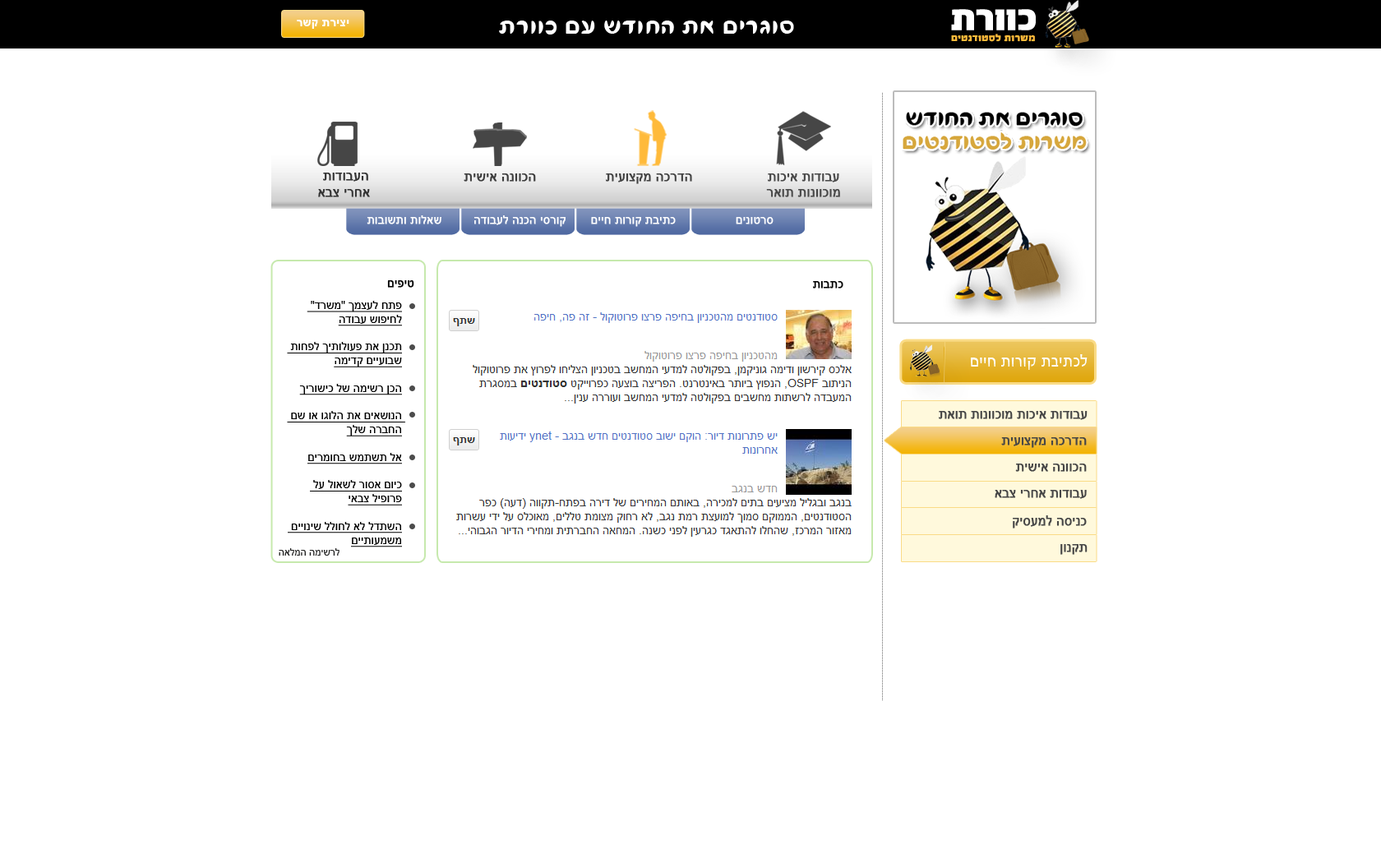
<style>
.page{position:relative;width:1381px;height:863px;background:#ffffff}
.page>*{position:absolute;margin:0}
.t1{font:11.5px "Arial-BoldMT";letter-spacing:0.03em;color:#ffffff}
.t2{font:28.8px "FbFlamingo-Regular";letter-spacing:0.03em;color:#ffffff}
.t3{font:9.9px "FbAdrenalin-Black";letter-spacing:0.03em;color:#ffba3a}
.t4{font:13.2px "ArialMT";color:#333333;font-weight:bold}
.t5{font:13.2px "ArialMT";color:#3c3c3c;font-weight:bold}
.t6{font:13.2px "ArialMT";color:#414141;font-weight:bold}
.t7{font:13.2px "ArialMT";color:#484848;font-weight:bold}
.t8{font:11.5px "ArialMT";color:#ffffff;font-weight:bold}
.t9{font:11.5px "ArialMT";color:#000000;font-weight:bold}
.t10{font:11.5px "ArialMT";color:#000000;text-decoration:underline}
.t11{font:16.4px "FbConcept-Regular";letter-spacing:0.03em;color:#ffffff}
.t12{font:12.9px "ArialMT";color:#464646;font-weight:bold}
.t13{font:9.9px "ArialMT";color:#212121}
</style>
<div class="page">
<p class="t1" style="left:297px;top:20px;width:52px;height:9px">רשק תריצי</p>
<p class="t2" style="left:499px;top:21px;width:295px;height:14px">תרווכ םע שדוחה תא םירגוס</p>
<p class="t3" style="left:951px;top:34px;width:84px;height:8px">םיטנדוטסל תורשמ</p>
<p class="t4" style="left:318px;top:173px;width:52px;height:24px;text-align:center">תודובעה<br>אבצ ירחא</p>
<p class="t5" style="left:464px;top:173px;width:72px;height:9px">תישיא הנווכה</p>
<p class="t6" style="left:606px;top:173px;width:86px;height:11px">תיעוצקמ הכרדה</p>
<p class="t7" style="left:766px;top:173px;width:74px;height:24px;text-align:center">תוכיא תודובע<br>ראות תונווכומ</p>
<p class="t8" style="left:367px;top:215px;width:407px;height:12px">תובושתו תולאש         הדובעל הנכה יסרוק       םייח תורוק תביתכ                 םינוטרס</p>
<p class="t9" style="left:387px;top:280px;width:27px;height:8px">םיפיט</p>
<p class="t9" style="left:813px;top:281px;width:31px;height:8px">תובתכ</p>
<p class="t10" style="left:287px;top:301px;width:118px;height:247px;text-align:right">"דרשמ" ךמצעל חתפ<br>הדובע שופיחל<br><br> תוחפל ךיתולועפ תא ןנכת<br>המידק םייעובש<br><br>ךירושיכ לש המישר ןכה<br><br> םש וא וגולה תא םיאשונה <br>ךלש הרבחה<br><br>םירמוחב שמתשת לא<br><br> לע לואשל רוסא םויכ<br>יאבצ ליפורפ<br><br> םייוניש ללוחל אל לדתשה<br>םייתועמשמ</p>
<p class="t11" style="left:971px;top:354px;width:117px;height:16px">םייח תורוק תביתכל</p>
<p class="t12" style="left:939px;top:411px;width:149px;height:9px">תאות תונווכומ תוכיא תודובע</p>
<p class="t12" style="left:1001px;top:437px;width:86px;height:11px">תיעוצקמ הכרדה</p>
<p class="t12" style="left:1015px;top:464px;width:72px;height:8px">תישיא הנווכה</p>
<p class="t12" style="left:995px;top:490px;width:92px;height:9px">אבצ ירחא תודובע</p>
<p class="t12" style="left:1013px;top:516px;width:74px;height:13px">קיסעמל הסינכ</p>
<p class="t12" style="left:1061px;top:544px;width:27px;height:11px">ןונקת</p>
<p class="t13" style="left:279px;top:548px;width:61px;height:8px">האלמה המישרל</p>
</div>
